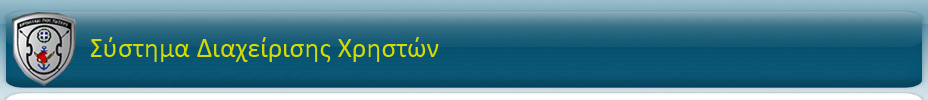
<style>
.page{position:relative;width:928px;height:100px}
.page>*{position:absolute;margin:0}
.t1{font:28px "Calibri";color:#d5da01}
</style>
<div class="page">
<p class="t1" style="left:90px;top:37px;width:349px;height:25px">Σύστημα Διαχείρισης Χρηστών</p>
</div>
